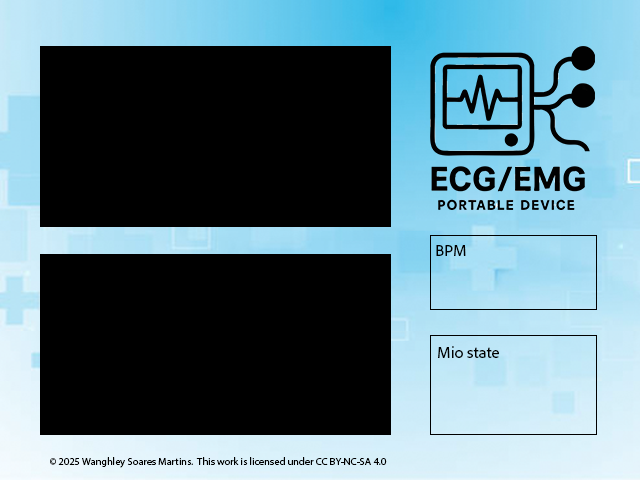
<style>
.page{position:relative;width:640px;height:480px;background:#000000}
.page>*{position:absolute;margin:0}
.t1{font:16.7px "AdobeClean-Regular";color:#000000}
.t2{font:10.4px "MyriadPro-Regular";color:#000000}
</style>
<div class="page">
<p class="t1" style="left:436px;top:245px;width:30px;height:11px">BPM</p>
<p class="t1" style="left:438px;top:346px;width:61px;height:12px">Mio state</p>
<p class="t2" style="left:50px;top:457px;width:337px;height:11px">© 2025 Wanghley Soares Martins.  This work is licensed under CC BY-NC-SA 4.0</p>
</div>
